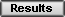
<style>
.page{position:relative;width:65px;height:17px}
.page>*{position:absolute;margin:0}
.t1{font:11px "Arial-BoldMT";color:#000000}
</style>
<div class="page">
<p class="t1" style="left:11px;top:4px;width:42px;height:15px">Results</p>
</div>
